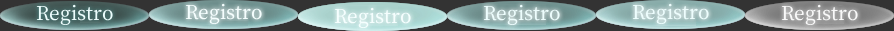
<style>
.page{position:relative;width:894px;height:31px;background:#333333}
.page>*{position:absolute;margin:0}
.t1{font:23px "OfficialFateFont-Medium";color:#edfdfd}
.t2{font:23px "OfficialFateFont-Medium";color:#f5fefe}
.t3{font:23px "OfficialFateFont-Medium";color:#f9f9f9}
</style>
<div class="page">
<p class="t1" style="left:36px;top:4px;width:77px;height:22px">Registro</p>
<p class="t2" style="left:185px;top:3px;width:77px;height:22px">Registro</p>
<p class="t1" style="left:483px;top:4px;width:77px;height:22px">Registro</p>
<p class="t1" style="left:632px;top:3px;width:77px;height:22px">Registro</p>
<p class="t3" style="left:781px;top:4px;width:77px;height:22px">Registro</p>
<p class="t2" style="left:334px;top:7px;width:77px;height:22px">Registro</p>
</div>
